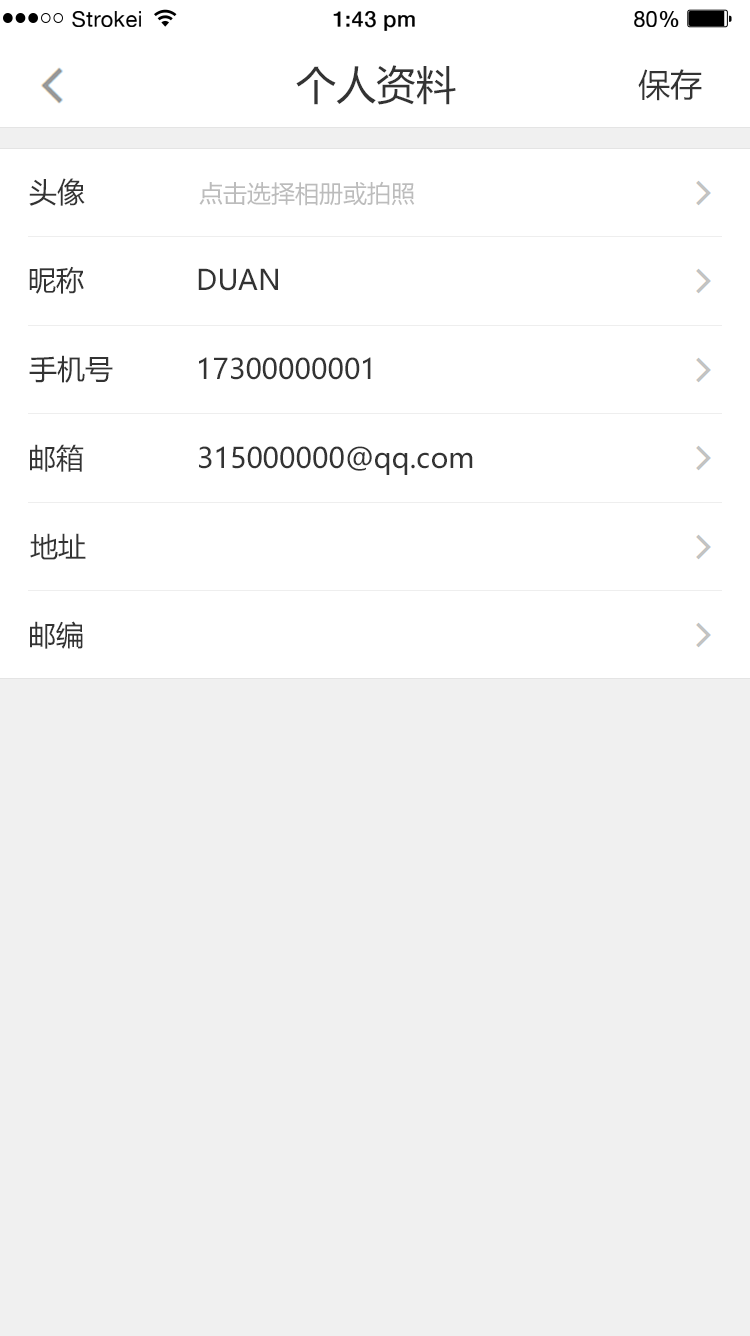
<style>
.page{position:relative;width:750px;height:1336px;background:#f0f0f0}
.page>*{position:absolute;margin:0}
.t1{font:21.8px "HelveticaNeue";letter-spacing:0.02em;color:#000000}
.t2{font:21.8px "HelveticaNeue-Medium";letter-spacing:0.02em;color:#000000}
.t3{font:40px "MicrosoftYaHei";color:#333333}
.t4{font:32px "MicrosoftYaHei";color:#333333}
.t5{font:28px "MicrosoftYaHei";color:#333333}
.t6{font:24px "MicrosoftYaHei";color:#bcbcbc}
</style>
<div class="page">
<p class="t1" style="left:72px;top:11px;width:69px;height:16px">Strokei</p>
<p class="t2" style="left:333px;top:11px;width:82px;height:20px">1:43 pm</p>
<p class="t1" style="left:634px;top:11px;width:45px;height:16px">80<span class="t2">%</span></p>
<p class="t3" style="left:296px;top:65px;width:160px;height:40px">个人资料</p>
<p class="t4" style="left:638px;top:69px;width:64px;height:32px">保存</p>
<p class="t5" style="left:29px;top:178px;width:56px;height:28px">头像</p>
<p class="t6" style="left:199px;top:181px;width:216px;height:25px">点击选择相册或拍照</p>
<p class="t5" style="left:29px;top:266px;width:55px;height:28px">昵称</p>
<p class="t5" style="left:198px;top:268px;width:80px;height:23px">DUAN</p>
<p class="t5" style="left:29px;top:355px;width:84px;height:28px">手机号</p>
<p class="t5" style="left:199px;top:357px;width:172px;height:23px">17300000001</p>
<p class="t5" style="left:30px;top:444px;width:54px;height:28px">邮箱</p>
<p class="t5" style="left:199px;top:446px;width:274px;height:29px">315000000@qq.com</p>
<p class="t5" style="left:30px;top:533px;width:56px;height:27px">地址</p>
<p class="t5" style="left:30px;top:621px;width:53px;height:28px">邮编</p>
</div>
